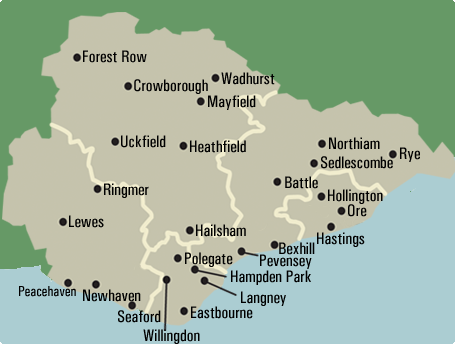
<style>
.page{position:relative;width:455px;height:344px;background:#669966}
.page>*{position:absolute;margin:0}
.t1{font:16.6px "Univers-Condensed-Medium";color:#000000}
.t2{font:14.5px "Univers-Condensed-Medium";color:#000000}
</style>
<div class="page">
<p class="t1" style="left:83px;top:50px;width:64px;height:13px">Forest Row</p>
<p class="t1" style="left:221px;top:72px;width:54px;height:13px">Wadhurst</p>
<p class="t1" style="left:134px;top:79px;width:74px;height:15px">Crowborough</p>
<p class="t1" style="left:208px;top:95px;width:48px;height:15px">Mayfield</p>
<p class="t1" style="left:121px;top:135px;width:45px;height:13px">Uckfield</p>
<p class="t1" style="left:329px;top:137px;width:51px;height:13px">Northiam</p>
<p class="t1" style="left:190px;top:140px;width:56px;height:13px">Heathfield</p>
<p class="t1" style="left:400px;top:147px;width:20px;height:15px">Rye</p>
<p class="t1" style="left:321px;top:156px;width:72px;height:13px">Sedlescombe</p>
<p class="t1" style="left:104px;top:183px;width:45px;height:15px">Ringmer</p>
<p class="t1" style="left:285px;top:176px;width:33px;height:13px">Battle</p>
<p class="t1" style="left:328px;top:189px;width:55px;height:15px">Hollington</p>
<p class="t1" style="left:348px;top:204px;width:19px;height:13px">Ore</p>
<p class="t1" style="left:69px;top:215px;width:35px;height:13px">Lewes</p>
<p class="t1" style="left:196px;top:224px;width:50px;height:13px">Hailsham</p>
<p class="t1" style="left:317px;top:232px;width:48px;height:15px">Hastings</p>
<p class="t1" style="left:279px;top:242px;width:36px;height:13px">Bexhill</p>
<p class="t1" style="left:185px;top:252px;width:48px;height:15px">Polegate</p>
<p class="t1" style="left:260px;top:254px;width:52px;height:15px">Pevensey</p>
<p class="t1" style="left:231px;top:270px;width:80px;height:15px">Hampden Park</p>
<p class="t2" style="left:19px;top:286px;width:57px;height:11px">Peacehaven</p>
<p class="t1" style="left:83px;top:289px;width:58px;height:13px">Newhaven</p>
<p class="t1" style="left:241px;top:291px;width:45px;height:15px">Langney</p>
<p class="t1" style="left:118px;top:310px;width:43px;height:13px">Seaford</p>
<p class="t1" style="left:191px;top:306px;width:62px;height:13px">Eastbourne</p>
<p class="t1" style="left:143px;top:329px;width:57px;height:15px">Willingdon</p>
</div>
